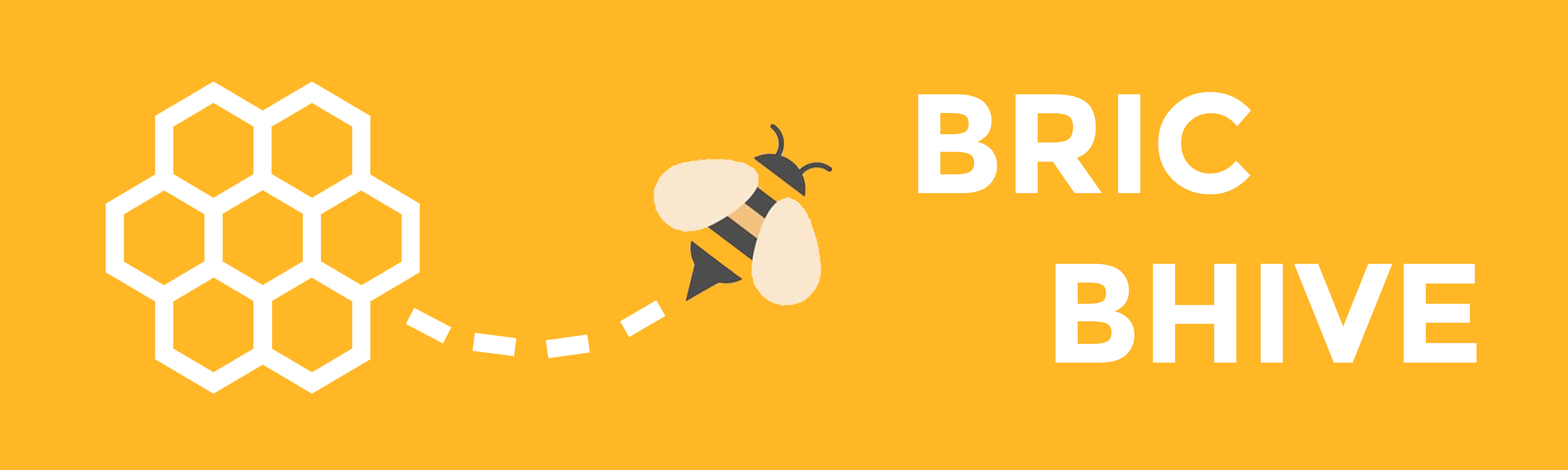
<style>
.page{position:relative;width:1568px;height:470px;background:#ffb726}
.page>*{position:absolute;margin:0}
.t1{font:141.1px "Montserrat-Bold";color:#ffffff}
</style>
<div class="page">
<p class="t1" style="left:918px;top:92px;width:559px;height:270px;text-align:center">BRIC<br>BHIVE</p>
</div>
